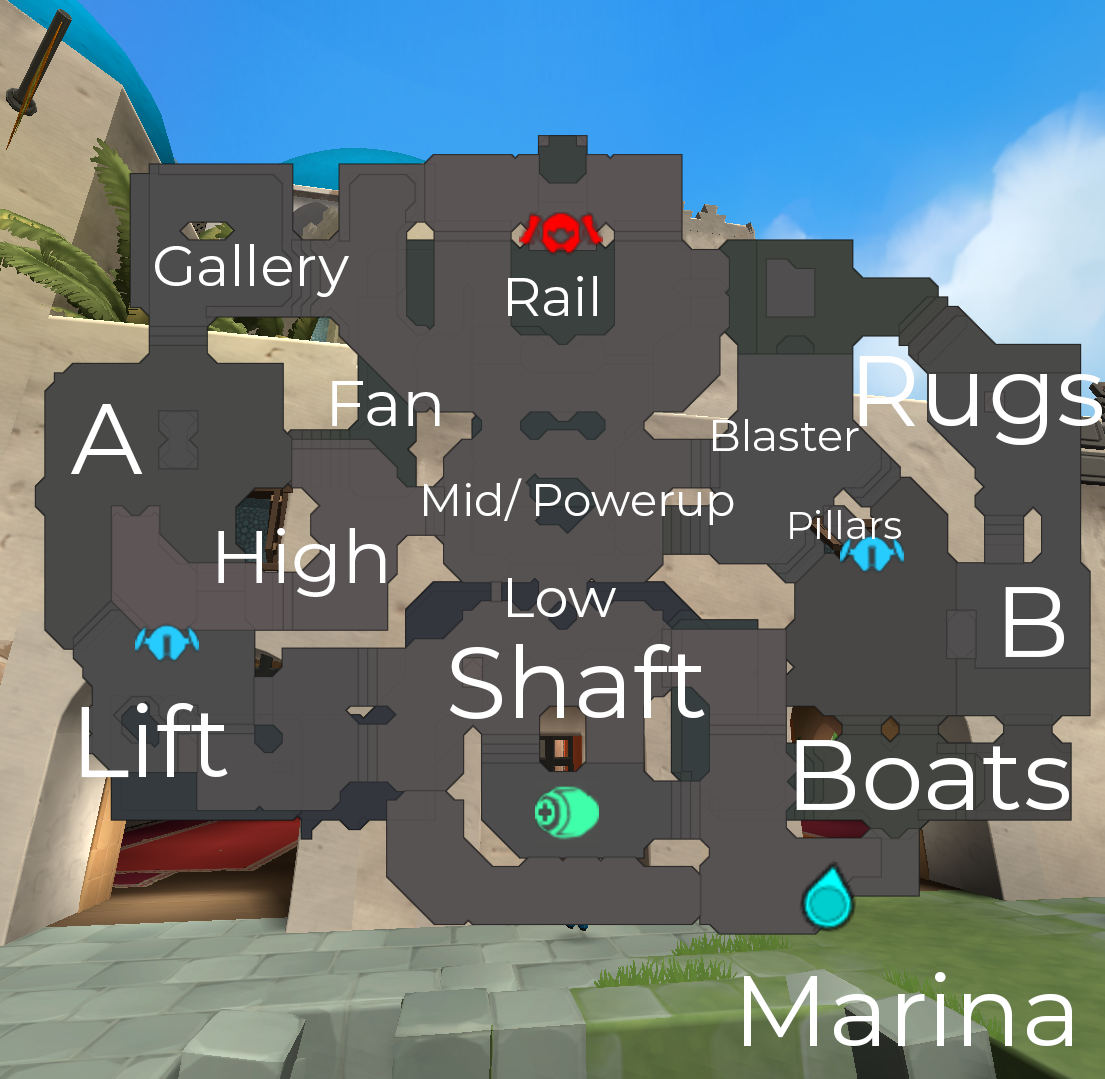
<style>
.page{position:relative;width:1105px;height:1079px}
.page>*{position:absolute;margin:0}
.t1{font:56.8px "Montserrat-Regular";color:#ffffff}
.t2{font:54.3px "Montserrat-Regular";color:#ffffff}
.t3{font:100px "Montserrat-Regular";color:#ffffff}
.t4{font:63.9px "Montserrat-Regular";color:#ffffff}
.t5{font:43.8px "Montserrat-Regular";color:#ffffff}
.t6{font:45px "Montserrat-Regular";color:#ffffff}
.t7{font:39.2px "Montserrat-Regular";color:#ffffff}
.t8{font:74.7px "Montserrat-Regular";color:#ffffff}
.t9{font:55.3px "Montserrat-Regular";color:#ffffff}
</style>
<div class="page">
<p class="t1" style="left:155px;top:244px;width:194px;height:53px">Gallery</p>
<p class="t2" style="left:508px;top:276px;width:89px;height:40px">Rail</p>
<p class="t3" style="left:859px;top:355px;width:243px;height:90px">Rugs</p>
<p class="t4" style="left:332px;top:381px;width:108px;height:45px">Fan</p>
<p class="t3" style="left:71px;top:404px;width:72px;height:70px">A</p>
<p class="t5" style="left:713px;top:419px;width:146px;height:32px">Blaster</p>
<p class="t6" style="left:424px;top:478px;width:310px;height:47px">Mid/ Powerup</p>
<p class="t7" style="left:790px;top:510px;width:111px;height:29px">Pillars</p>
<p class="t8" style="left:218px;top:528px;width:168px;height:69px">High</p>
<p class="t9" style="left:508px;top:578px;width:108px;height:39px">Low</p>
<p class="t3" style="left:1005px;top:587px;width:59px;height:70px">B</p>
<p class="t3" style="left:450px;top:644px;width:255px;height:75px">Shaft</p>
<p class="t3" style="left:81px;top:703px;width:147px;height:75px">Lift</p>
<p class="t3" style="left:796px;top:740px;width:273px;height:70px">Boats</p>
<p class="t3" style="left:744px;top:972px;width:328px;height:74px">Marina</p>
</div>
